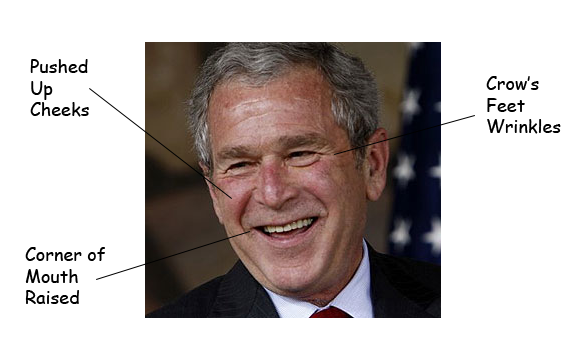
<style>
.page{position:relative;width:576px;height:360px;background:#ffffff}
.page>*{position:absolute;margin:0}
.t1{font:18px "ComicSansMS";color:#000000}
</style>
<div class="page">
<p class="t1" style="left:30px;top:59px;width:59px;height:58px">Pushed<br>Up<br>Cheeks</p>
<p class="t1" style="left:486px;top:76px;width:75px;height:58px">Crow’s<br>Feet<br>Wrinkles</p>
<p class="t1" style="left:25px;top:247px;width:80px;height:57px">Corner of<br>Mouth<br>Raised</p>
</div>
